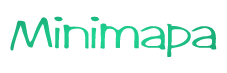
<style>
.page{position:relative;width:227px;height:73px;background:#ffffff}
.page>*{position:absolute;margin:0}
.t1{font:48px "Arctic2";color:#1dc386}
</style>
<div class="page">
<p class="t1" style="left:10px;top:16px;width:207px;height:41px">Minimapa</p>
</div>
